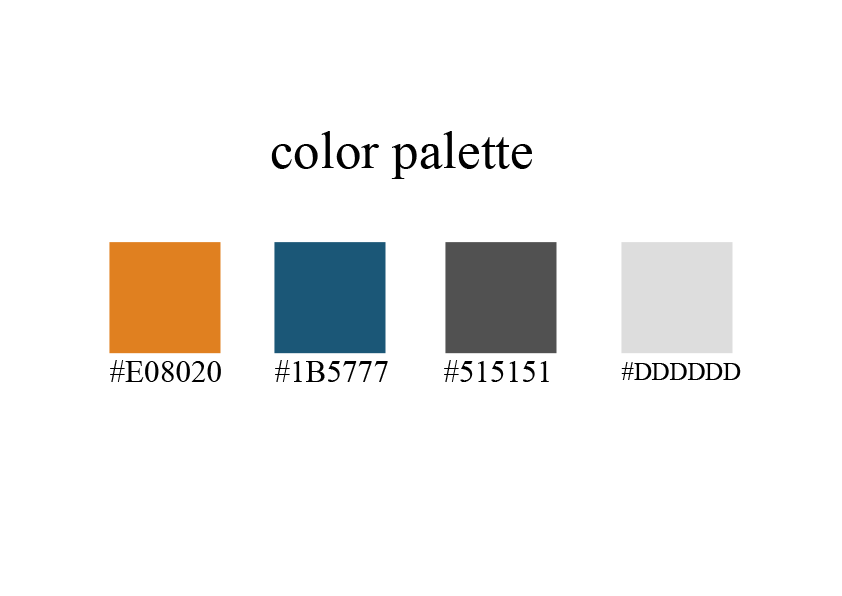
<style>
.page{position:relative;width:842px;height:596px;background:#ffffff}
.page>*{position:absolute;margin:0}
.t1{font:53.1px "MyriadPro-Regular";color:#000000}
.t2{font:31.2px "MyriadPro-Regular";color:#000000}
.t3{font:24.7px "MyriadPro-Regular";color:#000000}
</style>
<div class="page">
<p class="t1" style="left:271px;top:131px;width:261px;height:48px">color palette</p>
<p class="t2" style="left:110px;top:360px;width:111px;height:22px">#E08020</p>
<p class="t2" style="left:275px;top:360px;width:113px;height:22px">#1B5777</p>
<p class="t2" style="left:444px;top:360px;width:105px;height:22px">#515151</p>
<p class="t3" style="left:621px;top:362px;width:120px;height:18px">#DDDDDD</p>
</div>
